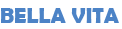
<style>
.page{position:relative;width:122px;height:29px;background:#ffffff}
.page>*{position:absolute;margin:0}
.t1{font:22px "BerlinSansFBDemi-Bold";color:#4c83c6}
</style>
<div class="page">
<p class="t1" style="left:1px;top:8px;width:118px;height:15px">BELLA VITA</p>
</div>
